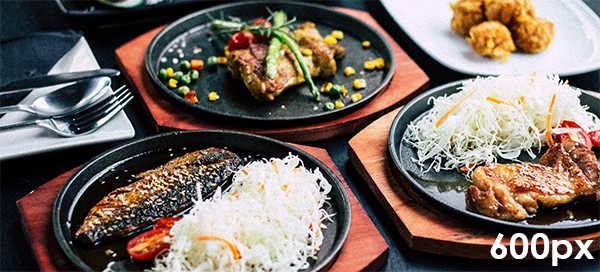
<style>
.page{position:relative;width:600px;height:272px}
.page>*{position:absolute;margin:0}
.t1{font:36px "CenturyGothic-Bold";color:#ffffff}
</style>
<div class="page">
<p class="t1" style="left:490px;top:233px;width:104px;height:33px">600px</p>
</div>
